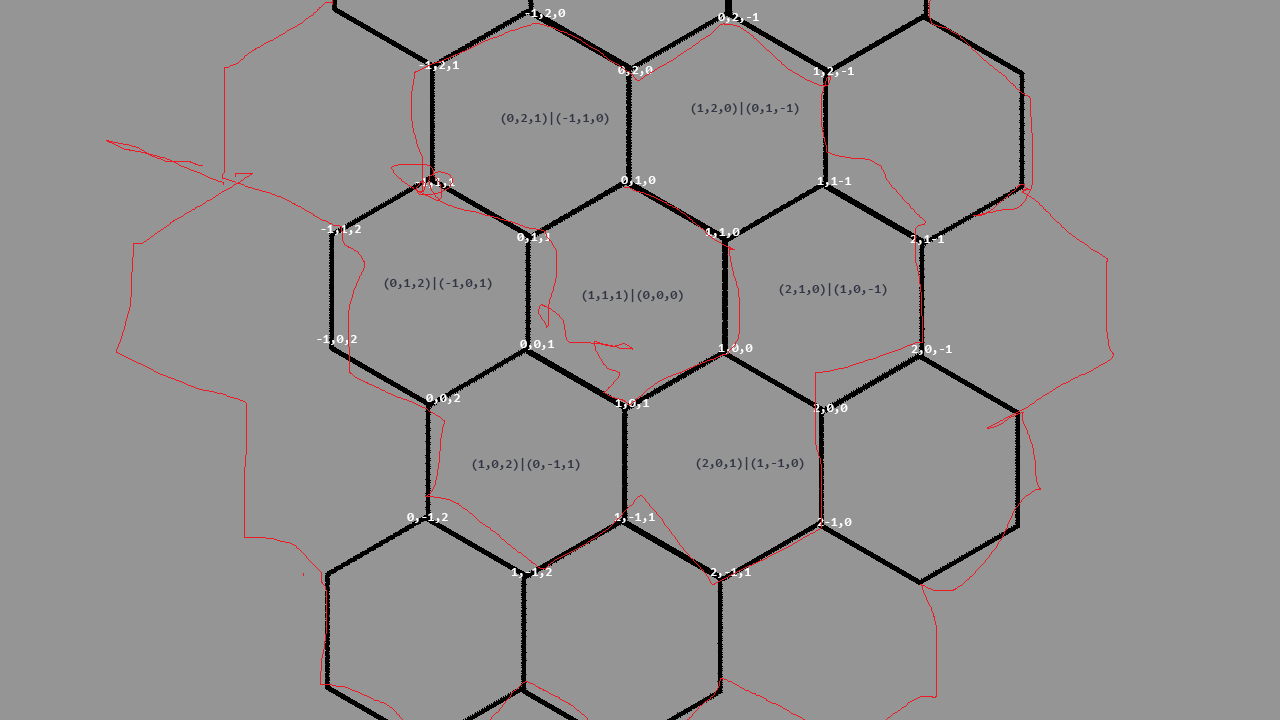
<style>
.page{position:relative;width:1280px;height:720px;background:#959595}
.page>*{position:absolute;margin:0}
.t1{font:12.5px "Consolas-Bold";color:#ffffff}
.t2{font:12.5px "Consolas-Bold";color:#333745}
</style>
<div class="page">
<p class="t1" style="left:525px;top:9px;width:41px;height:10px">-1,2,0</p>
<p class="t1" style="left:718px;top:13px;width:41px;height:10px">0,2,-1</p>
<p class="t1" style="left:419px;top:61px;width:40px;height:10px">-1,2,1</p>
<p class="t1" style="left:618px;top:66px;width:35px;height:10px">0,2,0</p>
<p class="t1" style="left:813px;top:67px;width:41px;height:10px">1,2,-1</p>
<p class="t2" style="left:691px;top:102px;width:108px;height:13px">(1,2,0)|(0,1,-1)</p>
<p class="t2" style="left:501px;top:112px;width:108px;height:13px">(0,2,1)|(-1,1,0)</p>
<p class="t1" style="left:415px;top:178px;width:40px;height:10px">-1,1,1</p>
<p class="t1" style="left:621px;top:176px;width:35px;height:10px">0,1,0</p>
<p class="t1" style="left:817px;top:177px;width:35px;height:10px">1,1-1</p>
<p class="t1" style="left:321px;top:225px;width:40px;height:10px">-1,1,2</p>
<p class="t1" style="left:517px;top:233px;width:35px;height:10px">0,1,1</p>
<p class="t1" style="left:705px;top:228px;width:35px;height:10px">1,1,0</p>
<p class="t1" style="left:910px;top:235px;width:35px;height:10px">2,1-1</p>
<p class="t2" style="left:384px;top:277px;width:108px;height:13px">(0,1,2)|(-1,0,1)</p>
<p class="t2" style="left:582px;top:289px;width:101px;height:13px">(1,1,1)|(0,0,0)</p>
<p class="t2" style="left:779px;top:283px;width:108px;height:13px">(2,1,0)|(1,0,-1)</p>
<p class="t1" style="left:317px;top:335px;width:40px;height:10px">-1,0,2</p>
<p class="t1" style="left:520px;top:340px;width:35px;height:10px">0,0,1</p>
<p class="t1" style="left:718px;top:344px;width:35px;height:10px">1,0,0</p>
<p class="t1" style="left:911px;top:345px;width:41px;height:10px">2,0,-1</p>
<p class="t1" style="left:426px;top:394px;width:35px;height:10px">0,0,2</p>
<p class="t1" style="left:615px;top:399px;width:35px;height:10px">1,0,1</p>
<p class="t1" style="left:813px;top:404px;width:35px;height:10px">2,0,0</p>
<p class="t2" style="left:472px;top:458px;width:108px;height:13px">(1,0,2)|(0,-1,1)</p>
<p class="t2" style="left:696px;top:457px;width:108px;height:13px">(2,0,1)|(1,-1,0)</p>
<p class="t1" style="left:407px;top:513px;width:41px;height:10px">0,-1,2</p>
<p class="t1" style="left:614px;top:513px;width:41px;height:10px">1,-1,1</p>
<p class="t1" style="left:817px;top:518px;width:35px;height:10px">2-1,0</p>
<p class="t1" style="left:511px;top:568px;width:41px;height:10px">1,-1,2</p>
<p class="t1" style="left:710px;top:568px;width:41px;height:10px">2,-1,1</p>
</div>
